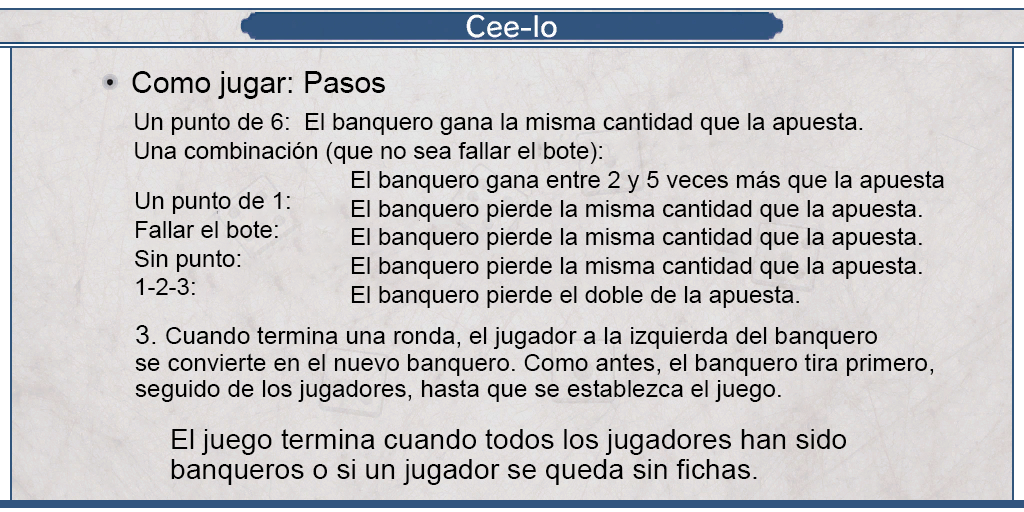
<style>
.page{position:relative;width:1024px;height:512px}
.page>*{position:absolute;margin:0}
.t1{font:29.8px "ArialMT";color:#000000}
.t2{font:24px "ArialMT";color:#000000}
.t3{font:23.9px "ArialMT";color:#000000}
.t4{font:23.8px "ArialMT";color:#000000}
.t5{font:24.2px/26.9px "ArialMT";color:#000000}
.t6{font:26.5px/26.9px "ArialMT";color:#000000}
.t7{font:28px/30px "ArialMT";color:#000000}
</style>
<div class="page">
<p class="t1" style="left:132px;top:71px;width:253px;height:28px">Como jugar: Pasos</p>
<p class="t2" style="left:135px;top:112px;width:728px;height:52px;text-align:justify">Un punto de 6:  El banquero gana la misma cantidad que la apuesta.<br>Una combinación (que no sea fallar el bote):</p>
<p class="t3" style="left:351px;top:170px;width:593px;height:138px;text-align:justify">El banquero gana entre 2 y 5 veces más que la apuesta <br>El banquero pierde la misma cantidad que la apuesta.<br>El banquero pierde la misma cantidad que la apuesta.<br>El banquero pierde la misma cantidad que la apuesta.<br>El banquero pierde el doble de la apuesta.</p>
<p class="t4" style="left:135px;top:191px;width:155px;height:104px;text-align:justify">Un punto de 1:<br>Fallar el bote:<br>Sin punto:<br>1-2-3:</p>
<p class="t5" style="left:135px;top:325px;width:799px;height:77px;text-align:justify"><span class="t6">3. </span>Cuando termina una ronda, el jugador a la izquierda del banquero <br>se convierte en el nuevo banquero. Como antes, el banquero tira primero, <br>seguido de los jugadores, hasta que se establezca el juego.</p>
<p class="t7" style="left:171px;top:429px;width:675px;height:56px;text-align:justify">El juego termina cuando todos los jugadores han sido<br>banqueros o si un jugador se queda sin fichas.</p>
</div>
